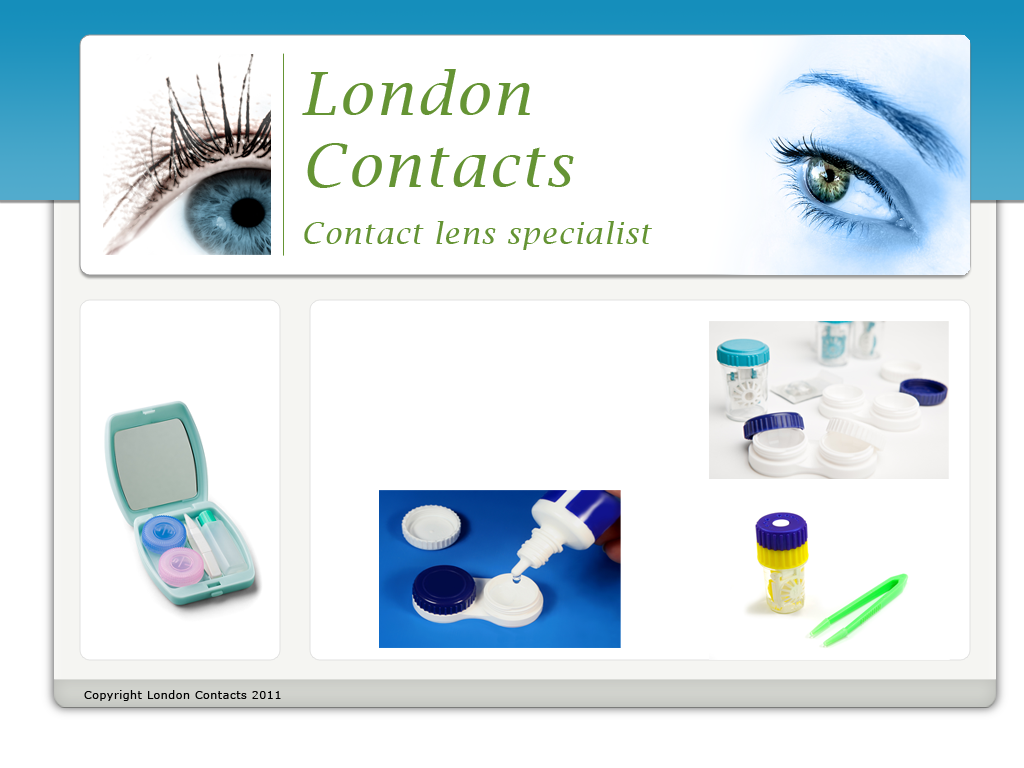
<style>
.page{position:relative;width:1024px;height:768px;background:#ffffff}
.page>*{position:absolute;margin:0}
.t1{font:60px/72px "LucidaBright-Italic";letter-spacing:0.05em;color:#659434}
.t2{font:11px "Verdana";letter-spacing:0.05em;color:#000000}
</style>
<div class="page">
<p class="t1" style="left:302px;top:69px;width:272px;height:119px">London<br>Contacts</p>
<p class="t2" style="left:84px;top:690px;width:197px;height:11px">Copyright London Contacts 2011</p>
</div>
